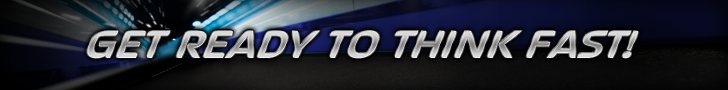
<style>
.page{position:relative;width:728px;height:90px}
.page>*{position:absolute;margin:0}
.t1{font:53.5px "SeptemberBoldItalic";text-transform:uppercase;font-style:italic}
</style>
<div class="page">
<p class="t1" style="left:87px;top:30px;width:552px;height:29px">get ready to think fast!</p>
</div>
